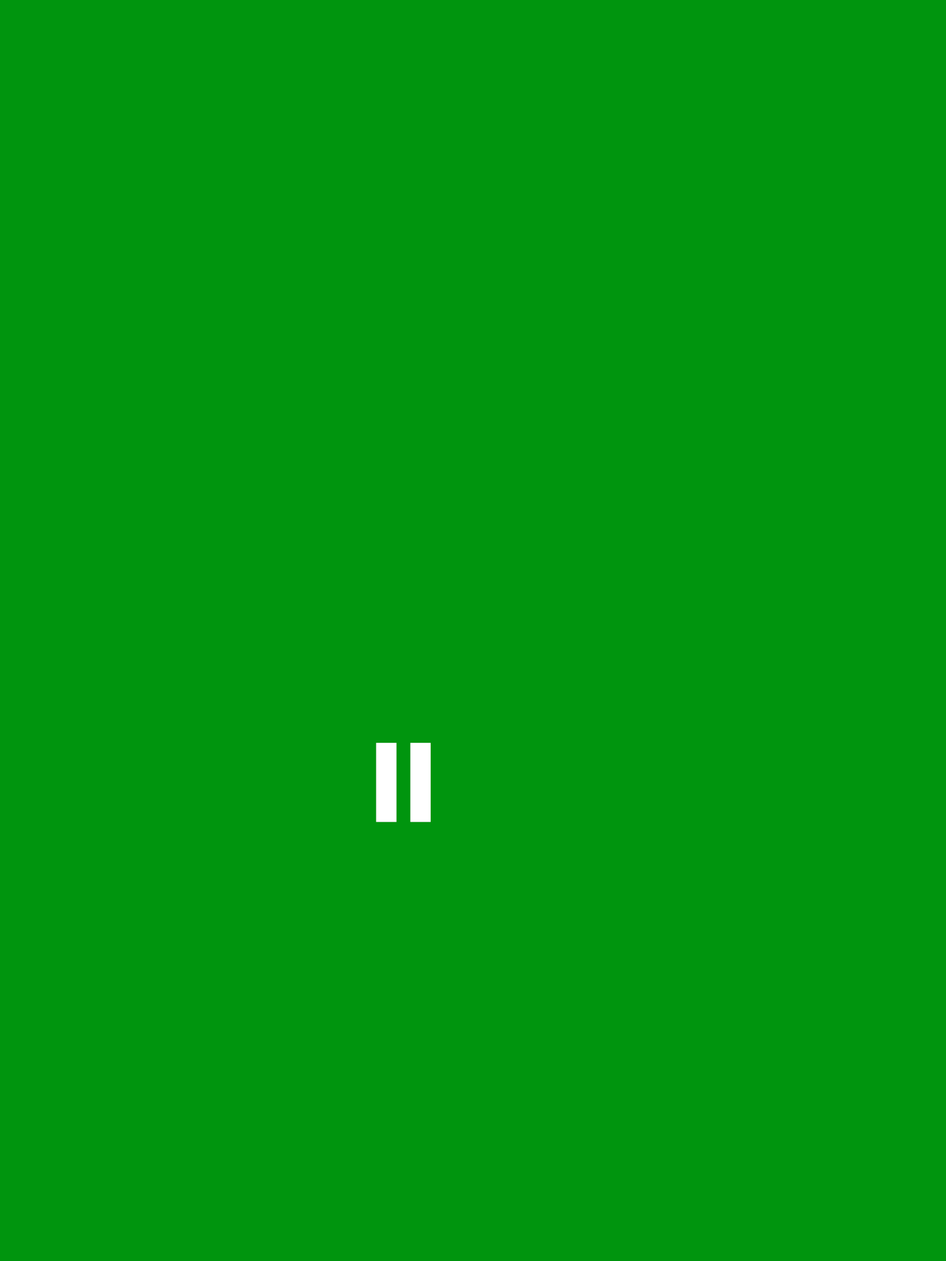
<style>
.page{position:relative;width:946px;height:1261px;background:#00950e}
.page>*{position:absolute;margin:0}
.t1{font:157.6px "ArialRoundedMTBold";color:#ffffff}
.t2{font:113.5px "ArialRoundedMTBold";color:#ffffff}
</style>
<div class="page">
<p class="t1" style="left:376px;top:743px;width:55px;height:79px;rotate:90deg"><span class="t2">  </span>=</p>
</div>
